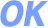
<style>
.page{position:relative;width:48px;height:28px;background:#ffffff}
.page>*{position:absolute;margin:0}
.t1{font:32px "RodinPro-EB";letter-spacing:-0.046em;color:#789ffc;font-style:italic}
</style>
<div class="page">
<p class="t1" style="left:0px;top:0px;width:48px;height:27px">OK</p>
</div>
